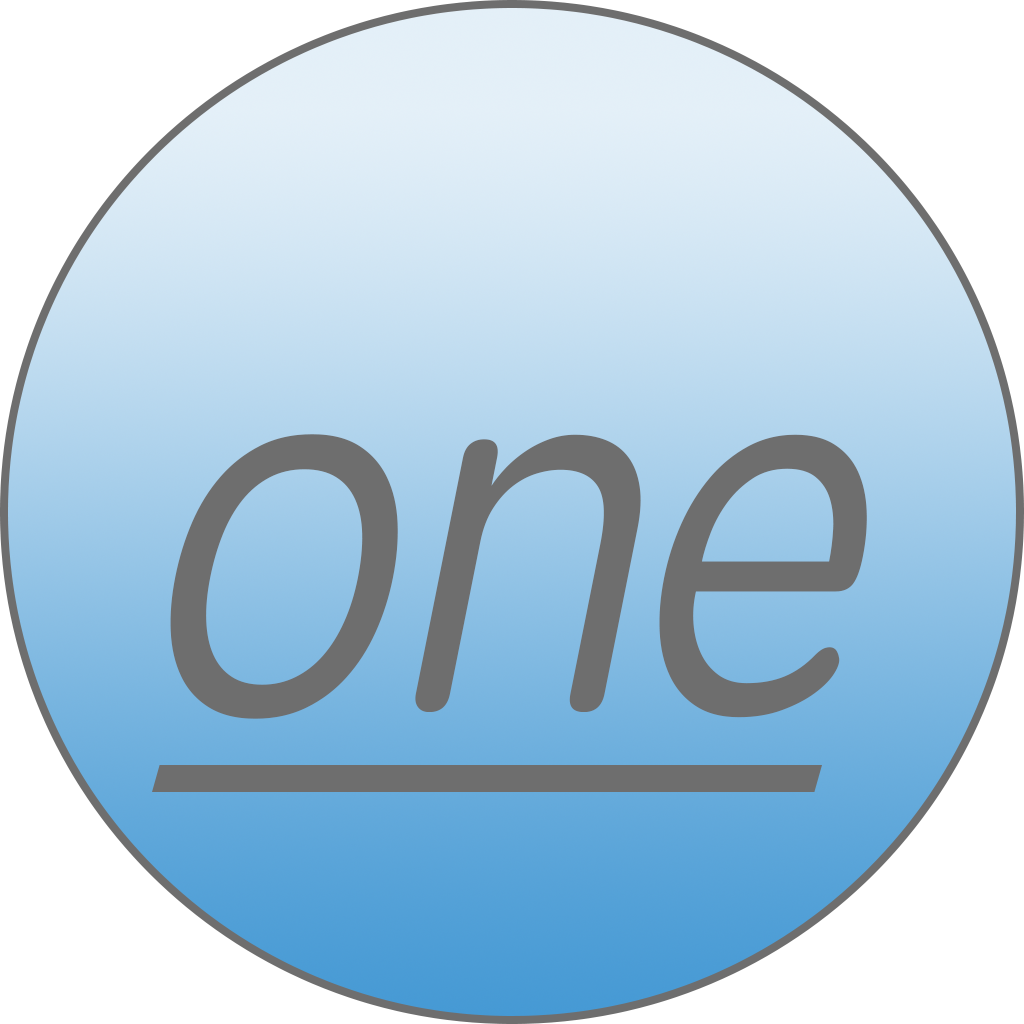
<style>
.page{position:relative;width:1024px;height:1024px;background:#ffffff}
.page>*{position:absolute;margin:0}
.t1{font:517.4px "STYuanti-SC-Regular";color:#6e6e6e;scale:0.87 1}
</style>
<div class="page">
<p class="t1" style="left:170px;top:434px;width:697px;height:285px">one</p>
</div>
